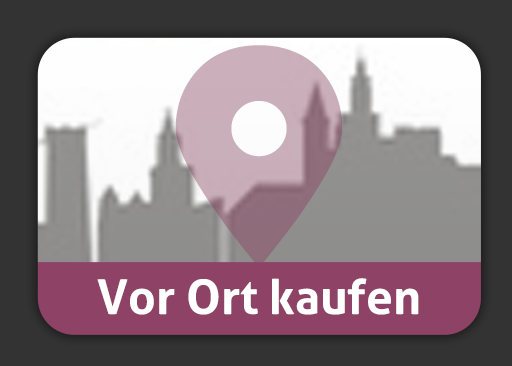
<style>
.page{position:relative;width:512px;height:366px;background:#333333}
.page>*{position:absolute;margin:0}
.t1{font:48px "Aller-Bold";color:#ffffff}
</style>
<div class="page">
<p class="t1" style="left:97px;top:278px;width:322px;height:37px">Vor Ort kaufen</p>
</div>
